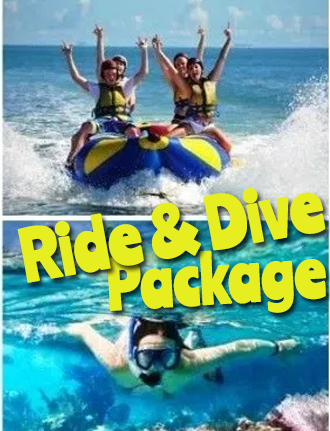
<style>
.page{position:relative;width:330px;height:431px}
.page>*{position:absolute;margin:0}
.t1{font:64.3px "Ranchers-Regular";color:#e7ee1f;font-weight:bold}
.t2{font:62.2px "Ranchers-Regular";color:#e7ee1f;font-weight:bold;scale:0.95 1}
</style>
<div class="page">
<p class="t1" style="left:17px;top:188px;width:309px;height:95px;rotate:-10deg">Ride &amp; Dive</p>
<p class="t2" style="left:106px;top:250px;width:220px;height:63px;rotate:-3deg">Package</p>
</div>
